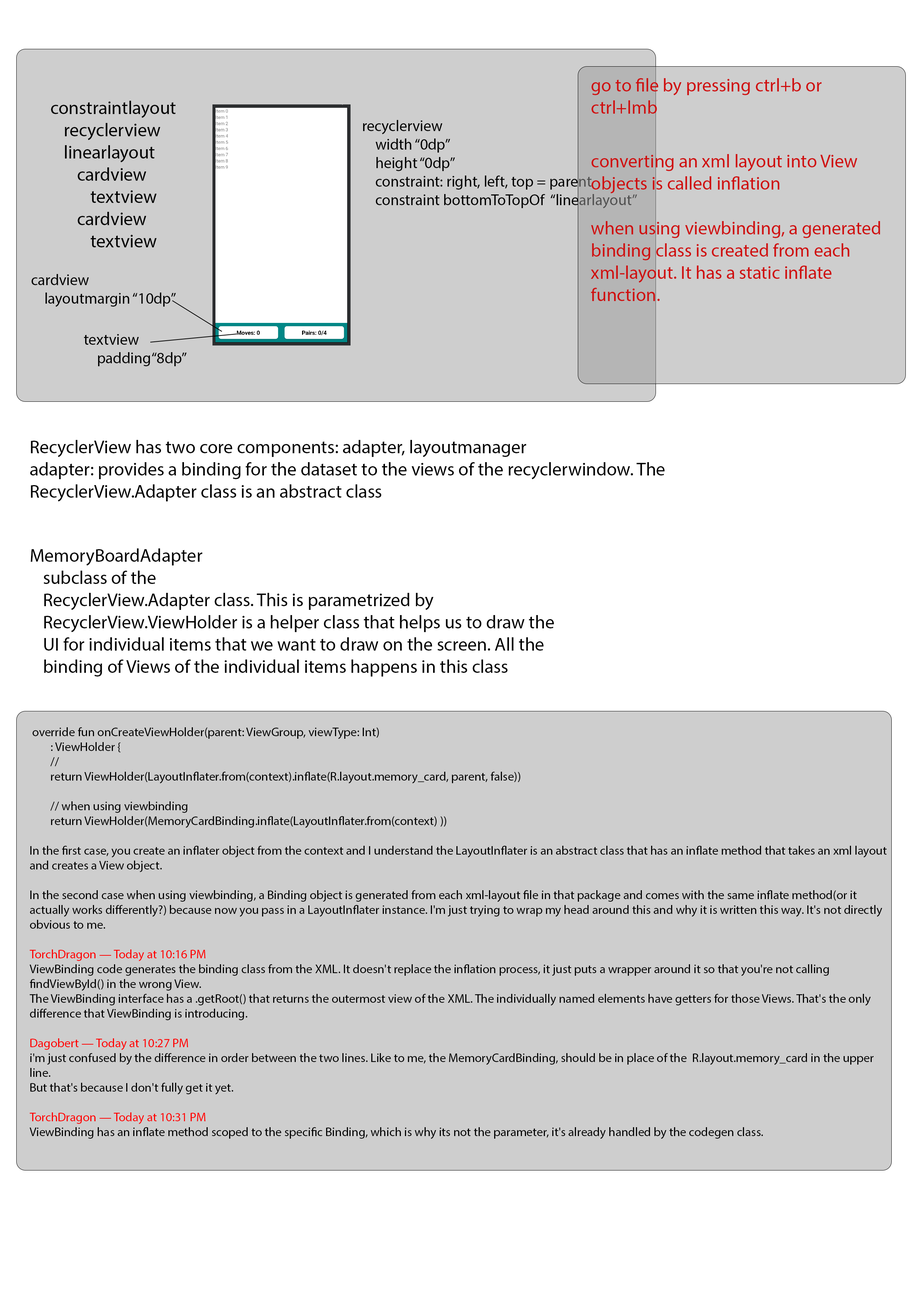
<style>
.page{position:relative;width:918px;height:1299px;background:#cecece}
.page>*{position:absolute;margin:0}
.t1{font:18.5px "MyriadPro-Regular";color:#cf0f0f}
.t2{font:18.5px "MyriadPro-Regular";color:#000000}
.t3{font:15.4px "MyriadPro-Regular";color:#000000}
.t4{font:12.3px "MyriadPro-Regular";color:#000000}
.t5{font:12.3px "MyriadPro-Regular";color:#ff0000}
</style>
<div class="page">
<p class="t1" style="left:592px;top:78px;width:230px;height:36px">go to file by pressing ctrl+b or ctrl+lmb</p>
<p class="t2" style="left:51px;top:101px;width:125px;height:146px">constraintlayout<br> recyclerview<br> linearlayout<br>  cardview<br>   textview<br>  cardview<br>   textview</p>
<p class="t3" style="left:363px;top:120px;width:274px;height:88px">recyclerview<br> width “0dp”<br> height “0dp”<br> constraint: right, left, top = parent<br> constraint bottomToTopOf  “linearlayout”</p>
<p class="t1" style="left:592px;top:154px;width:265px;height:39px">converting an xml layout into View objects is called inflation</p>
<p class="t1" style="left:591px;top:221px;width:289px;height:80px">when using viewbinding, a generated binding class is created from each xml-layout. It has a static inflate function.</p>
<p class="t3" style="left:31px;top:274px;width:145px;height:33px">cardview<br> layoutmargin “10dp”</p>
<p class="t3" style="left:84px;top:334px;width:103px;height:32px">textview<br> padding“8dp”</p>
<p class="t2" style="left:30px;top:440px;width:635px;height:62px">RecyclerView has two core components: adapter, layoutmanager<br>adapter: provides a binding for the dataset to the views of the recyclerwindow. The RecyclerView.Adapter class is an abstract class</p>
<p class="t2" style="left:31px;top:548px;width:523px;height:128px">MemoryBoardAdapter<br> subclass of the<br> RecyclerView.Adapter class. This is parametrized by<br> RecyclerView.ViewHolder is a helper class that helps us to draw the<br> UI for individual items that we want to draw on the screen. All the<br> binding of Views of the individual items happens in this class</p>
<p class="t4" style="left:30px;top:727px;width:857px;height:412px">override fun onCreateViewHolder(parent: ViewGroup, viewType: Int)<br>        : ViewHolder {<br>        // <br>        return ViewHolder(LayoutInflater.from(context).inflate(R.layout.memory_card, parent, false))<br><br>        // when using viewbinding<br>        return ViewHolder(MemoryCardBinding.inflate(LayoutInflater.from(context) ))<br><br>In the first case, you create an inflater object from the context and I understand the LayoutInflater is an abstract class that has an inflate method that takes an xml layout and creates a View object.<br><br>In the second case when using viewbinding, a Binding object is generated from each xml-layout file in that package and comes with the same inflate method(or it actually works differently?) because now you pass in a LayoutInflater instance. I'm just trying to wrap my head around this and why it is written this way. It's not directly obvious to me. <br><br><span class="t5">TorchDragon — Today at 10:16 PM<br></span>ViewBinding code generates the binding class from the XML. It doesn't replace the inflation process, it just puts a wrapper around it so that you're not calling findViewById() in the wrong View.<br>The ViewBinding interface has a .getRoot() that returns the outermost view of the XML. The individually named elements have getters for those Views. That's the only difference that ViewBinding is introducing.<br><br><span class="t5">Dagobert — Today at 10:27 PM<br></span>i'm just confused by the difference in order between the two lines. Like to me, the MemoryCardBinding, should be in place of the  R.layout.memory_card in the upper line.<br>But that's because I don't fully get it yet. <br><br><span class="t5">TorchDragon — Today at 10:31 PM<br></span>ViewBinding has an inflate method scoped to the specific Binding, which is why its not the parameter, it's already handled by the codegen class.</p>
</div>
